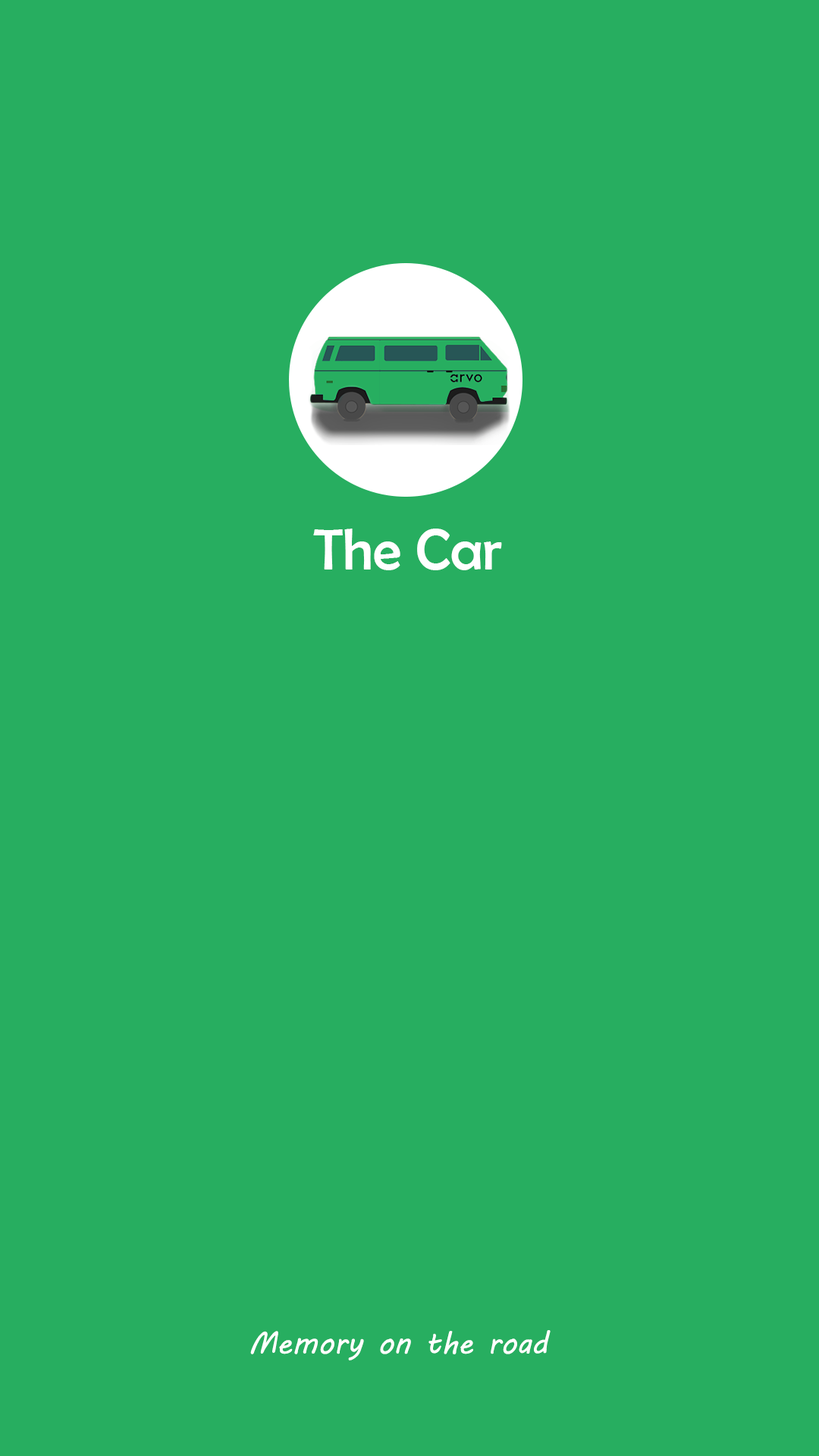
<style>
.page{position:relative;width:819px;height:1456px;background:#27ae60}
.page>*{position:absolute;margin:0}
.t1{font:58.1px "BerlinSansFB-Reg";color:#ffffff}
.t2{font:30.3px "MVBoli";color:#ffffff}
</style>
<div class="page">
<p class="t1" style="left:313px;top:529px;width:189px;height:41px">The Car</p>
<p class="t2" style="left:250px;top:1330px;width:301px;height:30px">Memory on the road</p>
</div>
